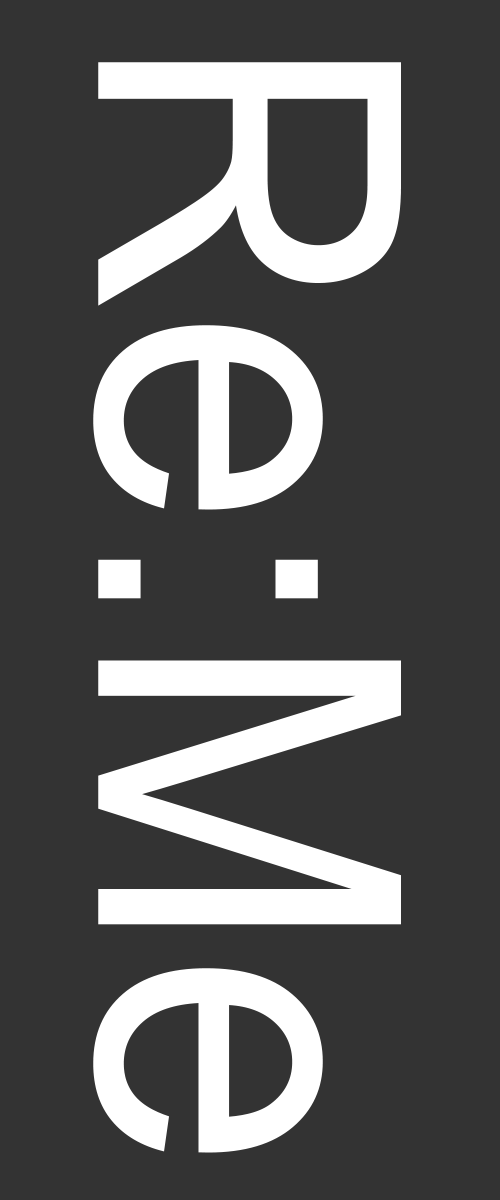
<style>
.page{position:relative;width:500px;height:1200px;background:#333333}
.page>*{position:absolute;margin:0}
.t1{font:422.7px "ArialMT";color:#ffffff;scale:0.91 1}
</style>
<div class="page">
<p class="t1" style="left:93px;top:62px;width:308px;height:1091px;rotate:90deg">Re:Me</p>
</div>
